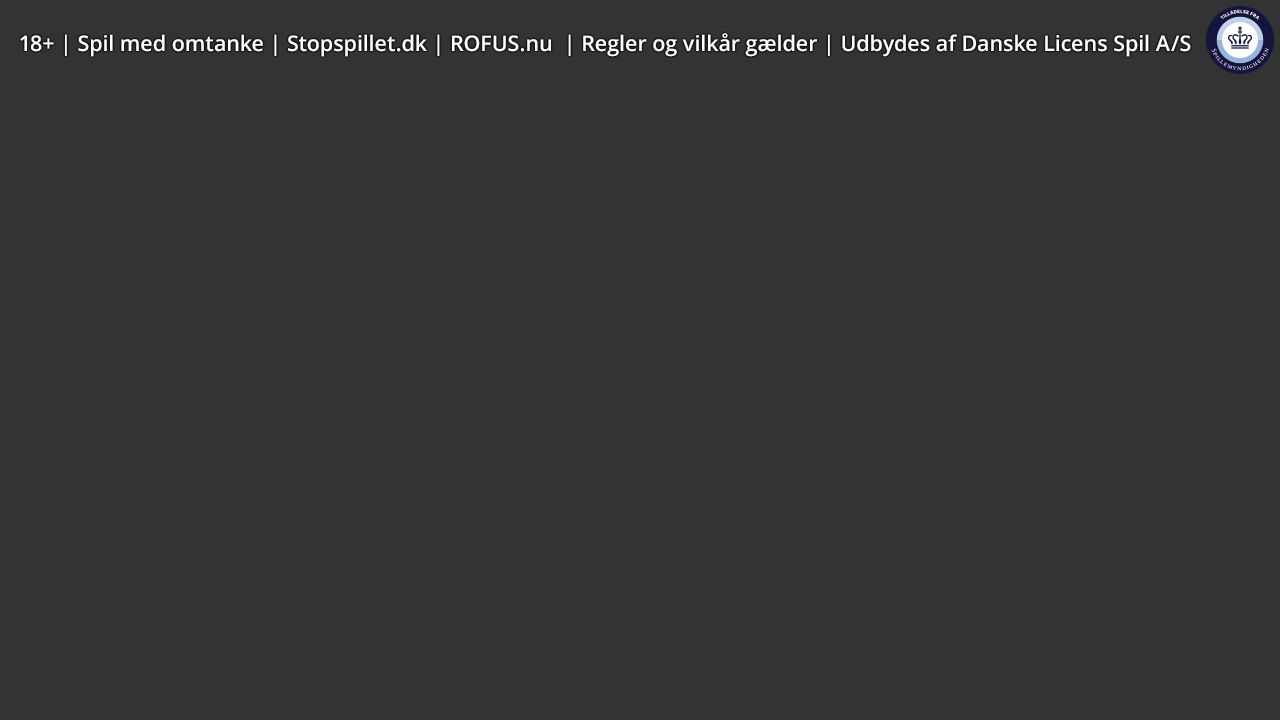
<style>
.page{position:relative;width:1280px;height:720px;background:#333333}
.page>*{position:absolute;margin:0}
.t1{font:21.5px "OpenSans-Semibold";color:#ffffff}
</style>
<div class="page">
<p class="t1" style="left:20px;top:33px;width:1171px;height:24px">18+ | Spil med omtanke | Stopspillet.dk | ROFUS.nu  | Regler og vilkår gælder | Udbydes af Danske Licens Spil A/S</p>
</div>
